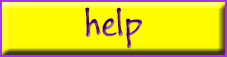
<style>
.page{position:relative;width:227px;height:57px;background:#fffc00}
.page>*{position:absolute;margin:0}
.t1{font:40px "BuxtonSketch"}
</style>
<div class="page">
<p class="t1" style="left:85px;top:7px;width:57px;height:42px">help</p>
</div>
